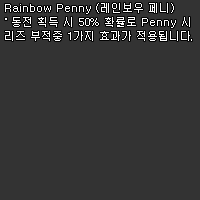
<style>
.page{position:relative;width:200px;height:200px;background:#333333}
.page>*{position:absolute;margin:0}
.t1{font:11px/14px "Dotum";color:#ffffff}
</style>
<div class="page">
<p class="t1" style="left:5px;top:3px;width:187px;height:38px">Rainbow Penny (레인보우 페니)<br>˚ 동전 획득 시 50% 확률로 Penny 시<br>리즈 부적중 1가지 효과가 적용됩니다.</p>
</div>
